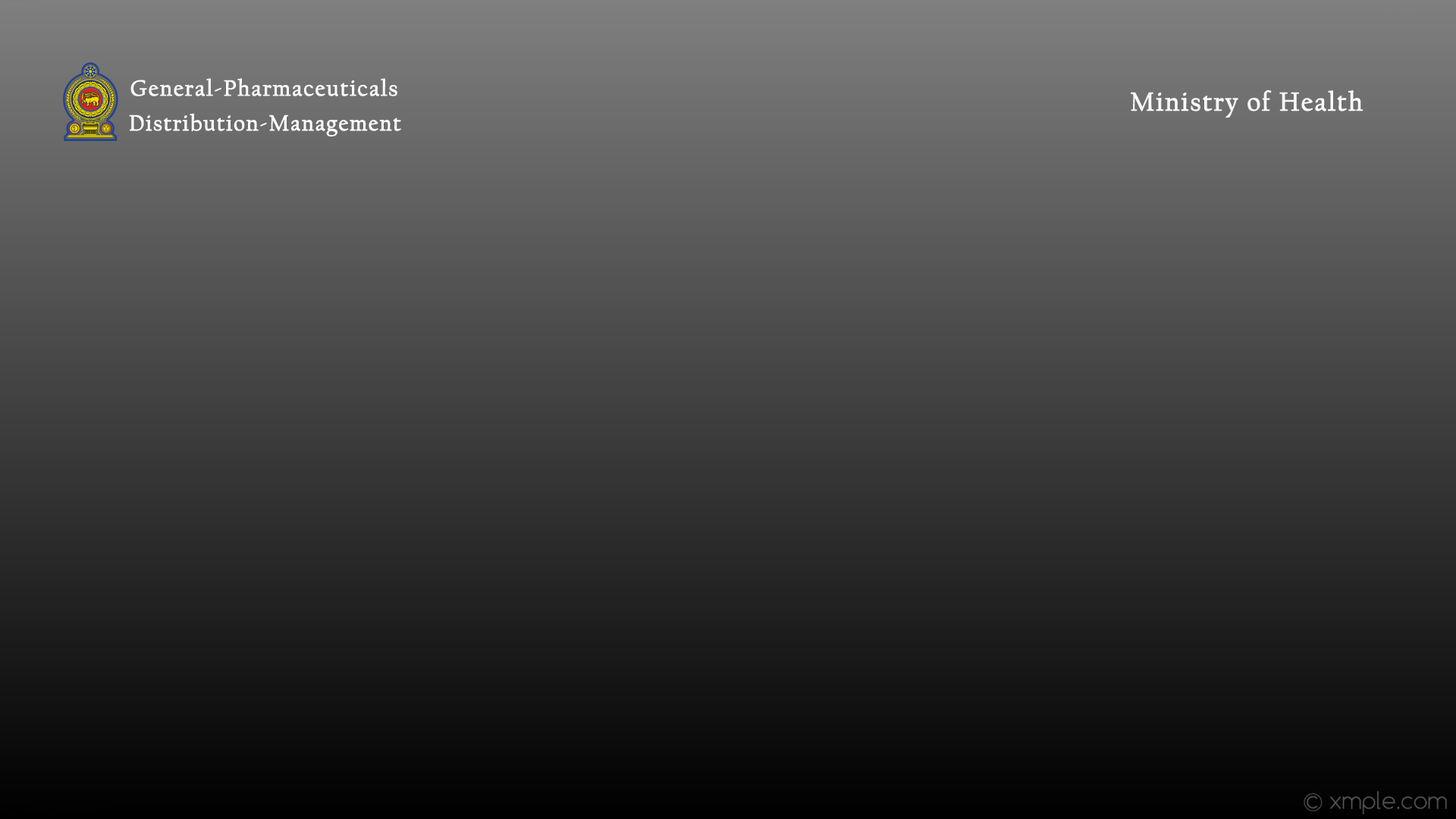
<style>
.page{position:relative;width:1456px;height:819px}
.page>*{position:absolute;margin:0}
.t1{font:22.9px "CalifornianFB-Reg";letter-spacing:0.04em;color:#f9f9fa;font-weight:bold}
.t2{font:26.7px "CalifornianFB-Reg";letter-spacing:0.04em;color:#f9f9fa;font-weight:bold}
.t3{font:22.3px "CalifornianFB-Reg";letter-spacing:0.04em;color:#ffffff;font-weight:bold}
</style>
<div class="page">
<p class="t1" style="left:130px;top:78px;width:267px;height:18px">General-Pharmaceuticals</p>
<p class="t2" style="left:1131px;top:89px;width:232px;height:29px">Ministry of Health</p>
<p class="t3" style="left:129px;top:113px;width:272px;height:23px">Distribution-Management</p>
</div>
